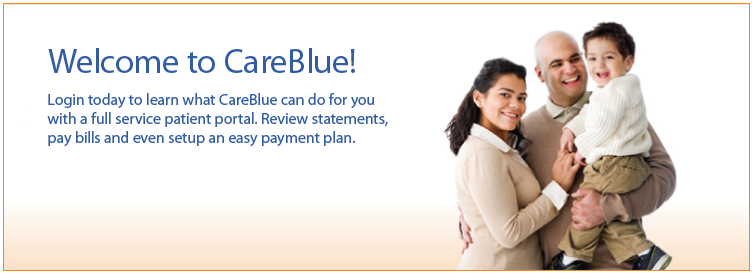
<style>
.page{position:relative;width:752px;height:274px;background:#ffffff}
.page>*{position:absolute;margin:0}
.t1{font:34.7px "MyriadPro-Regular";color:#325da4}
.t2{font:16px "MyriadPro-Regular";color:#325da4}
</style>
<div class="page">
<p class="t1" style="left:48px;top:48px;width:307px;height:25px">Welcome to CareBlue!</p>
<p class="t2" style="left:47px;top:93px;width:341px;height:53px">Login today to learn what CareBlue can do for you<br>with a full service patient portal. Review statements,<br>pay bills and even setup an easy payment plan.</p>
</div>
